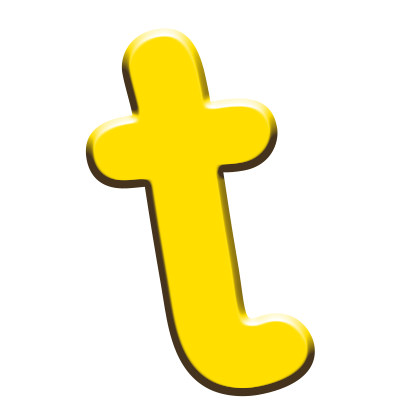
<style>
.page{position:relative;width:420px;height:420px;background:#ffffff}
.page>*{position:absolute;margin:0}
.t1{font:528.4px "ComicHelvetic-Heavy";letter-spacing:-0.04em;color:#ffde00}
</style>
<div class="page">
<p class="t1" style="left:85px;top:28px;width:230px;height:369px;rotate:-10deg">t</p>
</div>
